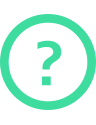
<style>
.page{position:relative;width:96px;height:125px;background:#ffffff}
.page>*{position:absolute;margin:0}
.t1{font:66.7px "Corbel-Bold";color:#3edc9f}
</style>
<div class="page">
<p class="t1" style="left:37px;top:40px;width:25px;height:46px">?</p>
</div>
